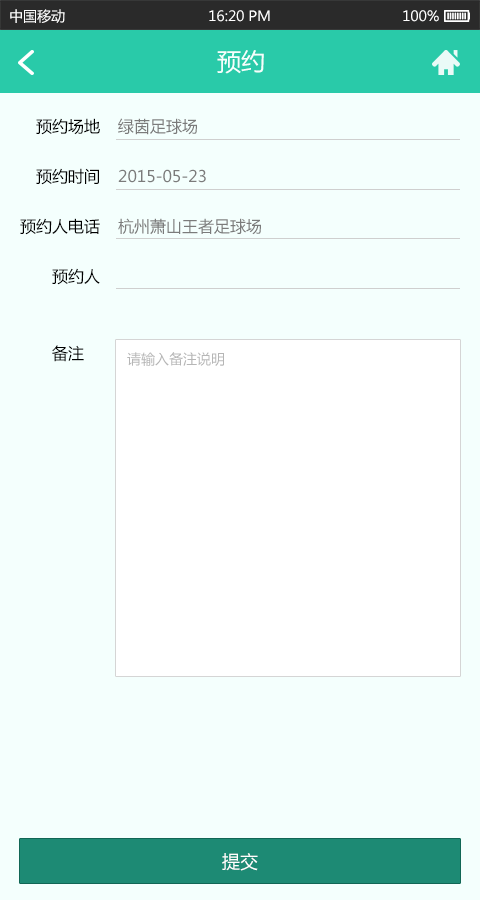
<style>
.page{position:relative;width:480px;height:900px;background:#f4fffd}
.page>*{position:absolute;margin:0}
.t1{font:14px "MicrosoftYaHei";color:#ffffff}
.t2{font:24px "MicrosoftYaHei";color:#f4fffd}
.t3{font:16px/50px "MicrosoftYaHei";color:#000000}
.t4{font:16px "MicrosoftYaHei";color:#7b7b7b}
.t5{font:16px "MicrosoftYaHei";color:#000000}
.t6{font:14px "MicrosoftYaHei";color:#b6b6b6}
.t7{font:18px "MicrosoftYaHei";color:#ffffff}
</style>
<div class="page">
<p class="t1" style="left:10px;top:9px;width:55px;height:14px">中国移动</p>
<p class="t1" style="left:209px;top:10px;width:61px;height:12px">16:20 PM</p>
<p class="t1" style="left:403px;top:10px;width:36px;height:12px">100%</p>
<p class="t2" style="left:217px;top:50px;width:47px;height:24px">预约</p>
<p class="t3" style="left:20px;top:118px;width:80px;height:167px;text-align:right">预约场地<br>预约时间<br>预约人电话<br>预约人</p>
<p class="t4" style="left:118px;top:118px;width:79px;height:17px">绿茵足球场</p>
<p class="t4" style="left:118px;top:169px;width:88px;height:14px">2015-05-23</p>
<p class="t4" style="left:118px;top:218px;width:143px;height:17px">杭州萧山王者足球场</p>
<p class="t5" style="left:52px;top:345px;width:32px;height:17px">备注</p>
<p class="t6" style="left:127px;top:352px;width:97px;height:14px">请输入备注说明</p>
<p class="t7" style="left:222px;top:853px;width:36px;height:18px">提交</p>
</div>
